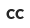
<style>
.page{position:relative;width:30px;height:28px;background:#ffffff}
.page>*{position:absolute;margin:0}
.t1{font:13px "Lato-Black";letter-spacing:0.05em;color:#262626}
</style>
<div class="page">
<p class="t1" style="left:6px;top:9px;width:18px;height:10px">CC</p>
</div>
